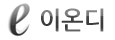
<style>
.page{position:relative;width:115px;height:40px;background:#ffffff}
.page>*{position:absolute;margin:0}
.t1{font:25px "NanumGothicBold";scale:0.95 1}
</style>
<div class="page">
<p class="t1" style="left:41px;top:8px;width:63px;height:24px">이온디</p>
</div>
